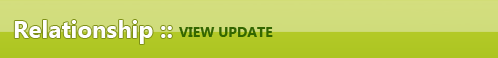
<style>
.page{position:relative;width:498px;height:58px}
.page>*{position:absolute;margin:0}
.t1{font:24px "SegoeUI-Bold";color:#fefefe}
.t2{font:14px "SegoeUI-Bold";color:#336600}
</style>
<div class="page">
<p class="t1" style="left:14px;top:20px;width:158px;height:24px">Relationship ::</p>
<p class="t2" style="left:179px;top:27px;width:94px;height:10px">VIEW UPDATE</p>
</div>
